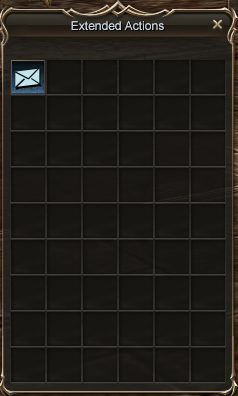
<style>
.page{position:relative;width:238px;height:396px}
.page>*{position:absolute;margin:0}
.t1{font:12px "ArialMT";color:#c6d0da}
</style>
<div class="page">
<p class="t1" style="left:71px;top:21px;width:93px;height:9px">Extended Actions</p>
</div>
